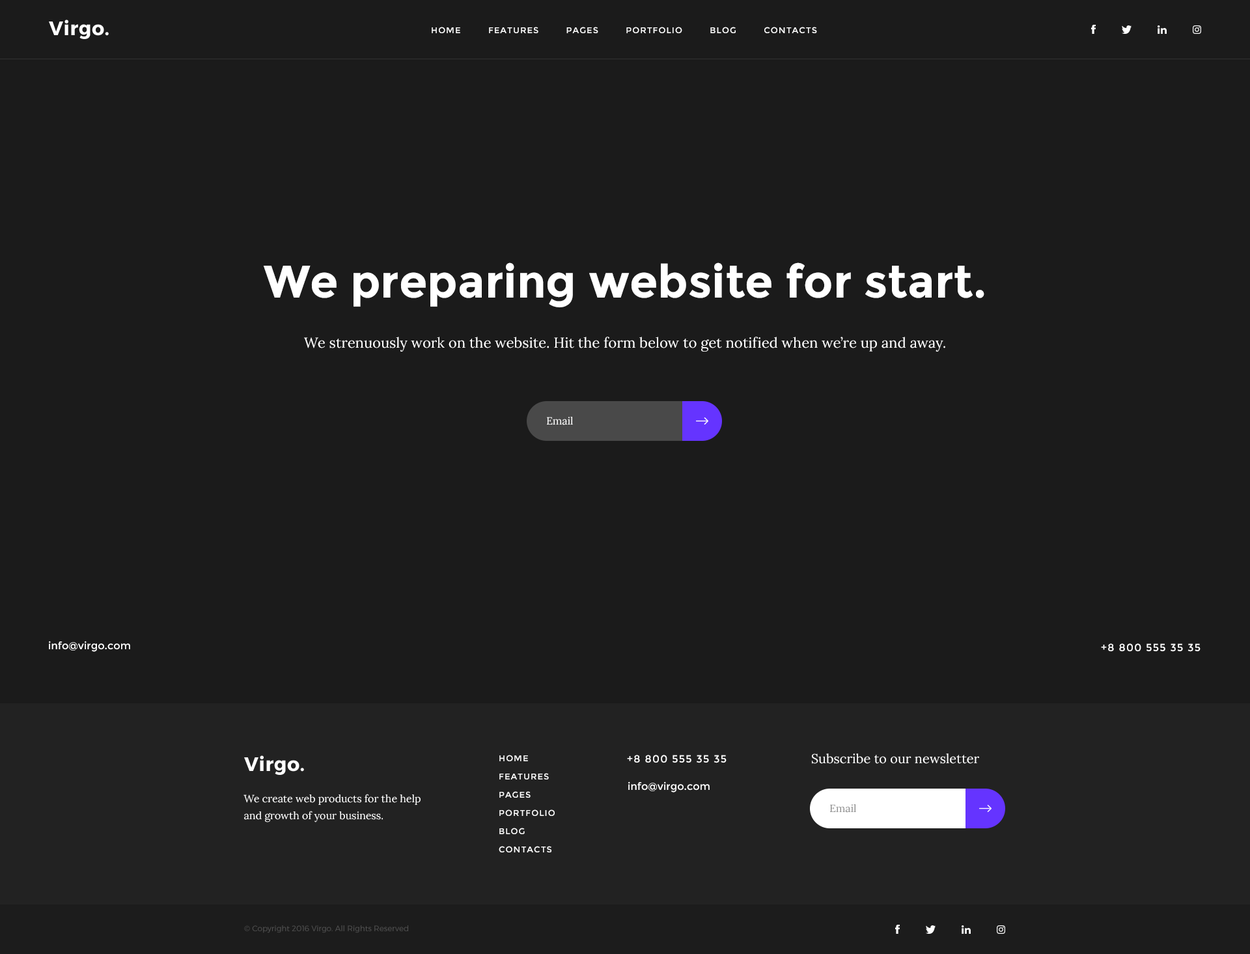
<style>
.page{position:relative;width:1250px;height:954px;background:#1b1b1b}
.page>*{position:absolute;margin:0}
.t1{font:8.5px "Montserrat-Regular";letter-spacing:0.08em;color:#ffffff;text-transform:uppercase}
.t2{font:45.8px "Montserrat-Bold";color:#ffffff}
.t3{font:14.4px "Lora-Regular";color:#ffffff}
.t4{font:10.4px "Lora-Regular";color:#ffffff}
.t5{font:10.4px "Montserrat-Regular";color:#ffffff}
.t6{font:10.4px "Montserrat-Regular";letter-spacing:0.08em;color:#ffffff;text-transform:uppercase}
.t7{font:8.5px/18.2px "Montserrat-Regular";letter-spacing:0.08em;color:#ffffff;text-transform:uppercase}
.t8{font:13px "Lora-Regular";color:#fefefe}
.t9{font:10.4px/16.9px "Lora-Regular";color:#fefefe}
.t10{font:10.4px "Lora-Regular";color:#8a8a8a}
.t11{font:7.8px "Montserrat-Light";color:#525252}
</style>
<div class="page">
<p class="t1" style="left:432px;top:27px;width:385px;height:6px">home         features         pages         portfolio         blog         contacts</p>
<p class="t2" style="left:263px;top:262px;width:721px;height:45px">We preparing website for start.</p>
<p class="t3" style="left:304px;top:337px;width:641px;height:15px">We strenuously work on the website. Hit the form below to get notified when we’re up and away.</p>
<p class="t4" style="left:547px;top:417px;width:26px;height:8px">Email</p>
<p class="t5" style="left:49px;top:641px;width:81px;height:11px">info@virgo.com</p>
<p class="t6" style="left:1101px;top:643px;width:100px;height:9px">+8 800 555 35 35</p>
<p class="t7" style="left:499px;top:755px;width:56px;height:97px">home<br>features<br>pages<br>portfolio<br>blog<br>contacts</p>
<p class="t6" style="left:627px;top:755px;width:100px;height:8px">+8 800 555 35 35</p>
<p class="t8" style="left:812px;top:753px;width:167px;height:11px">Subscribe to our newsletter</p>
<p class="t5" style="left:628px;top:781px;width:82px;height:11px">info@virgo.com</p>
<p class="t9" style="left:244px;top:794px;width:177px;height:28px">We create web products for the help and growth of your business.</p>
<p class="t10" style="left:830px;top:804px;width:26px;height:9px">Email</p>
<p class="t11" style="left:244px;top:925px;width:164px;height:8px">© Copyright 2016 Virgo. All Rights Reserved</p>
</div>
